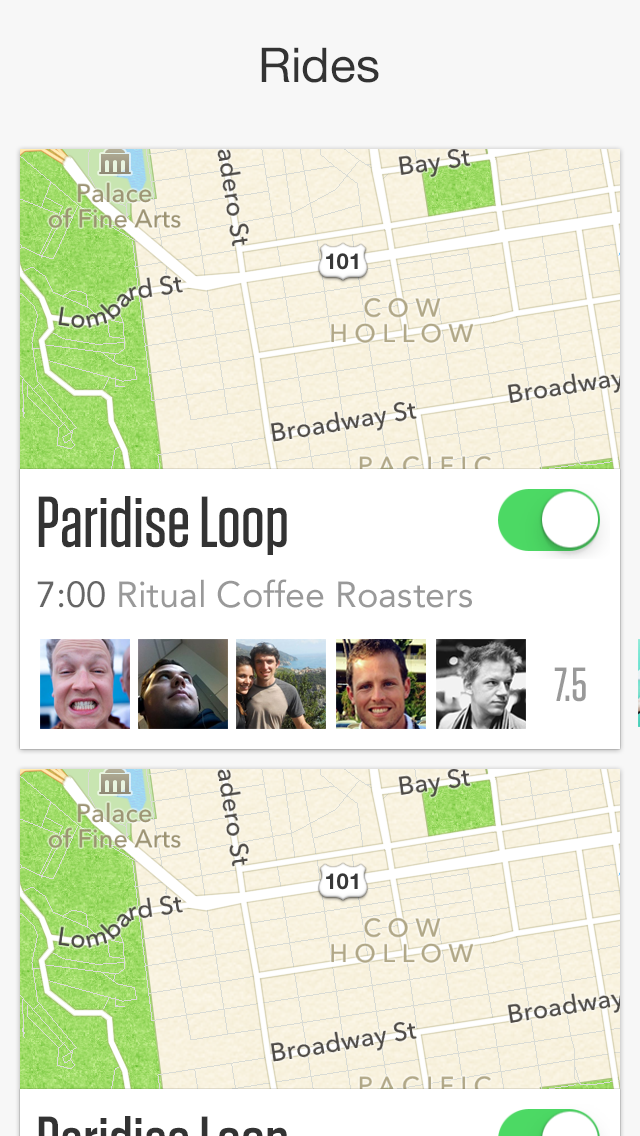
<style>
.page{position:relative;width:640px;height:1136px;background:#ffffff}
.page>*{position:absolute;margin:0}
.t1{font:48px "HelveticaNeue";color:#333333}
.t2{font:36px/60px "Avenir-Roman";color:#999999}
.t3{font:72px/60px "Tungsten-Medium";color:#333333}
.t4{font:36px/60px "Avenir-Roman";color:#666666}
.t5{font:48px "Tungsten-Medium";color:#999999}
</style>
<div class="page">
<p class="t1" style="left:261px;top:47px;width:118px;height:36px">Rides</p>
<p class="t2" style="left:37px;top:496px;width:435px;height:112px"><span class="t3">Paridise Loop<br></span><span class="t4">7:00</span> Ritual Coffee Roasters</p>
<p class="t5" style="left:554px;top:667px;width:32px;height:35px">7.5</p>
</div>
